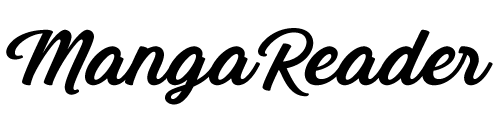
<style>
.page{position:relative;width:500px;height:125px;background:#ffffff}
.page>*{position:absolute;margin:0}
.t1{font:84.1px "GrandAventure";color:#000000}
</style>
<div class="page">
<p class="t1" style="left:6px;top:28px;width:487px;height:77px">MangaReader</p>
</div>
